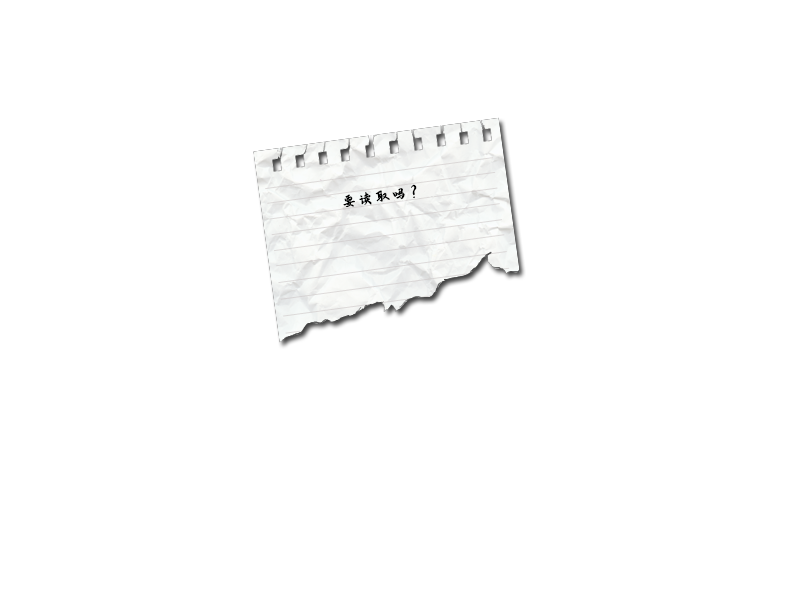
<style>
.page{position:relative;width:800px;height:600px;background:#ffffff}
.page>*{position:absolute;margin:0}
.t1{font:18.8px "slideyouran-Regular";color:#000000}
</style>
<div class="page">
<p class="t1" style="left:343px;top:184px;width:74px;height:23px;rotate:-8deg">要读取吗?</p>
</div>
